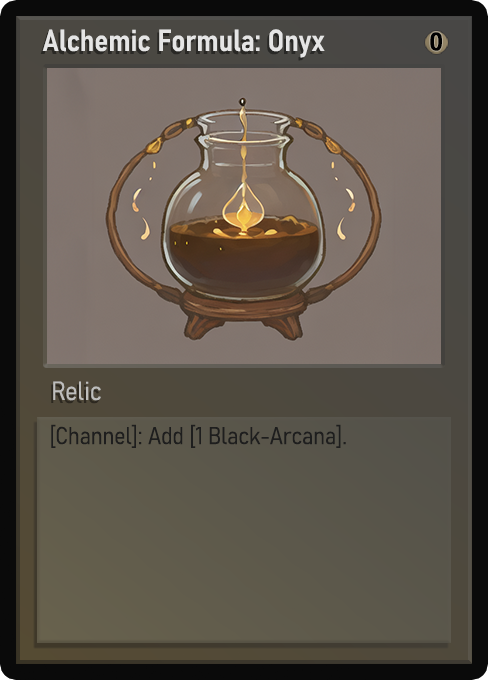
<style>
.page{position:relative;width:488px;height:680px}
.page>*{position:absolute;margin:0}
.t1{font:30px "Bahnschrift-SemiBoldSemiCondensed";color:#f2f2f2;font-weight:bold}
.t2{font:25px "WTRRoycroft";color:#000000;font-weight:bold;scale:1.09 1}
.t3{font:26px "Bahnschrift-LightSemiCondensed";color:#c8c8c8;font-weight:bold}
.t4{font:24px "Bahnschrift-LightSemiCondensed";color:#1e1e1e;font-weight:bold}
</style>
<div class="page">
<p class="t1" style="left:42px;top:29px;width:283px;height:29px;opacity:0.9">Alchemic Formula: Onyx</p>
<p class="t2" style="left:430px;top:32px;width:12px;height:19px">0</p>
<p class="t3" style="left:53px;top:381px;width:48px;height:20px;opacity:0.9">Relic</p>
<p class="t4" style="left:51px;top:424px;width:295px;height:24px">[Channel]: Add [1 Black-Arcana].</p>
</div>
